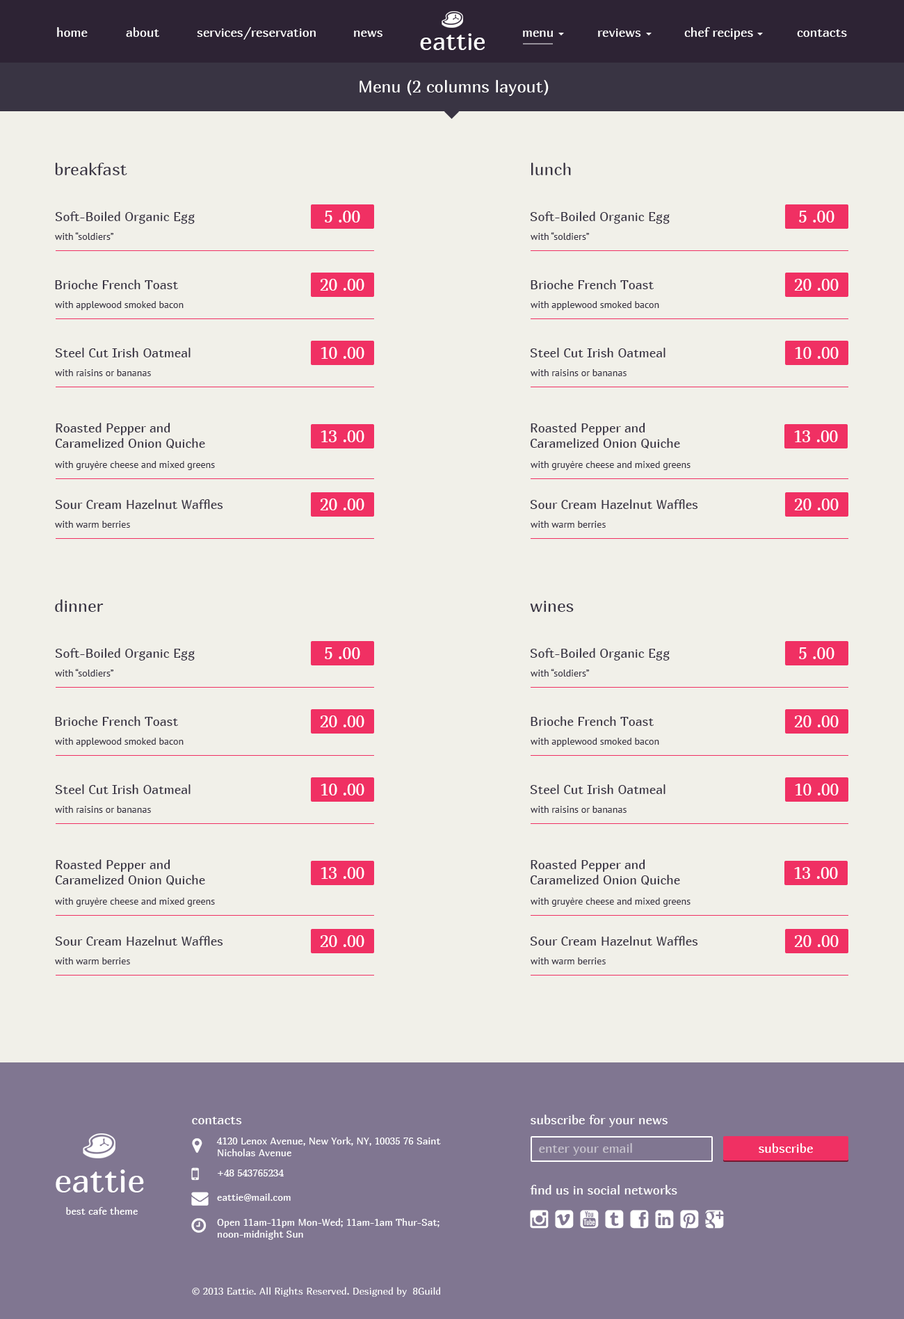
<style>
.page{position:relative;width:904px;height:1319px;background:#f1f0e9}
.page>*{position:absolute;margin:0}
.t1{font:12.5px "Marmelad-Regular";color:#ffffff}
.t2{font:24.3px "Marmelad-Regular";color:#fefefe}
.t3{font:16.7px "Marmelad-Regular";color:#ffffff}
.t4{font:16.7px "Marmelad-Regular";color:#393443}
.t5{font:12.5px "Marmelad-Regular";color:#393443}
.t6{font:9.7px "PTSans-Regular";color:#393443}
.t7{font:9.7px "Marmelad-Regular";color:#ffffff}
.t8{font:12.5px "Marmelad-Regular";color:#c6c2cd}
.t9{font:33.4px "Marmelad-Regular";color:#fefefe}
</style>
<div class="page">
<p class="t1" style="left:57px;top:27px;width:31px;height:10px">home</p>
<p class="t1" style="left:126px;top:27px;width:33px;height:10px">about</p>
<p class="t1" style="left:197px;top:27px;width:54px;height:13px">services/</p>
<p class="t1" style="left:252px;top:29px;width:64px;height:8px">reservation</p>
<p class="t1" style="left:598px;top:29px;width:43px;height:8px">reviews</p>
<p class="t1" style="left:684px;top:27px;width:69px;height:13px">chef recipes</p>
<p class="t1" style="left:797px;top:29px;width:50px;height:8px">contacts</p>
<p class="t1" style="left:354px;top:31px;width:28px;height:6px">news</p>
<p class="t2" style="left:420px;top:33px;width:65px;height:17px">eattie</p>
<p class="t1" style="left:523px;top:31px;width:30px;height:6px">menu</p>
<p class="t3" style="left:360px;top:80px;width:189px;height:16px">Menu (2 columns layout)</p>
<p class="t4" style="left:55px;top:163px;width:72px;height:12px">breakfast</p>
<p class="t4" style="left:531px;top:163px;width:40px;height:12px">lunch</p>
<p class="t5" style="left:56px;top:211px;width:139px;height:13px">Soft-Boiled Organic Egg</p>
<p class="t3" style="left:325px;top:211px;width:35px;height:12px">5 .00</p>
<p class="t5" style="left:531px;top:211px;width:139px;height:13px">Soft-Boiled Organic Egg</p>
<p class="t3" style="left:799px;top:211px;width:35px;height:12px">5 .00</p>
<p class="t6" style="left:55px;top:232px;width:59px;height:8px">with “soldiers”</p>
<p class="t6" style="left:531px;top:232px;width:59px;height:8px">with “soldiers”</p>
<p class="t5" style="left:55px;top:280px;width:123px;height:9px">Brioche French Toast</p>
<p class="t3" style="left:320px;top:279px;width:44px;height:12px">20 .00</p>
<p class="t5" style="left:531px;top:280px;width:123px;height:9px">Brioche French Toast</p>
<p class="t3" style="left:794px;top:279px;width:45px;height:12px">20 .00</p>
<p class="t6" style="left:55px;top:301px;width:129px;height:9px">with applewood smoked bacon</p>
<p class="t6" style="left:531px;top:301px;width:128px;height:9px">with applewood smoked bacon</p>
<p class="t5" style="left:56px;top:348px;width:135px;height:9px">Steel Cut Irish Oatmeal</p>
<p class="t3" style="left:321px;top:347px;width:43px;height:12px">10 .00</p>
<p class="t5" style="left:531px;top:348px;width:134px;height:9px">Steel Cut Irish Oatmeal</p>
<p class="t3" style="left:795px;top:347px;width:44px;height:12px">10 .00</p>
<p class="t6" style="left:55px;top:369px;width:96px;height:7px">with raisins or bananas</p>
<p class="t6" style="left:531px;top:369px;width:96px;height:7px">with raisins or bananas</p>
<p class="t5" style="left:55px;top:423px;width:150px;height:26px">Roasted Pepper and <br>Caramelized Onion Quiche</p>
<p class="t5" style="left:530px;top:423px;width:150px;height:26px">Roasted Pepper and <br>Caramelized Onion Quiche</p>
<p class="t3" style="left:321px;top:430px;width:43px;height:12px">13 .00</p>
<p class="t3" style="left:794px;top:430px;width:44px;height:12px">13 .00</p>
<p class="t6" style="left:55px;top:461px;width:160px;height:9px">with gruyère cheese and mixed greens</p>
<p class="t6" style="left:531px;top:461px;width:159px;height:9px">with gruyère cheese and mixed greens</p>
<p class="t5" style="left:56px;top:499px;width:167px;height:10px">Sour Cream Hazelnut Waffles</p>
<p class="t3" style="left:320px;top:499px;width:44px;height:11px">20 .00</p>
<p class="t5" style="left:531px;top:499px;width:167px;height:10px">Sour Cream Hazelnut Waffles</p>
<p class="t3" style="left:794px;top:499px;width:45px;height:11px">20 .00</p>
<p class="t6" style="left:55px;top:521px;width:75px;height:7px">with warm berries</p>
<p class="t6" style="left:531px;top:521px;width:75px;height:7px">with warm berries</p>
<p class="t4" style="left:55px;top:599px;width:49px;height:13px">dinner</p>
<p class="t4" style="left:530px;top:601px;width:44px;height:11px">wines</p>
<p class="t5" style="left:56px;top:648px;width:139px;height:13px">Soft-Boiled Organic Egg</p>
<p class="t3" style="left:325px;top:647px;width:35px;height:12px">5 .00</p>
<p class="t5" style="left:531px;top:648px;width:139px;height:13px">Soft-Boiled Organic Egg</p>
<p class="t3" style="left:799px;top:647px;width:35px;height:12px">5 .00</p>
<p class="t6" style="left:55px;top:669px;width:59px;height:8px">with “soldiers”</p>
<p class="t6" style="left:531px;top:669px;width:59px;height:8px">with “soldiers”</p>
<p class="t5" style="left:55px;top:716px;width:123px;height:10px">Brioche French Toast</p>
<p class="t3" style="left:320px;top:716px;width:44px;height:11px">20 .00</p>
<p class="t5" style="left:531px;top:716px;width:123px;height:10px">Brioche French Toast</p>
<p class="t3" style="left:794px;top:716px;width:45px;height:11px">20 .00</p>
<p class="t6" style="left:55px;top:738px;width:129px;height:9px">with applewood smoked bacon</p>
<p class="t6" style="left:531px;top:738px;width:128px;height:9px">with applewood smoked bacon</p>
<p class="t5" style="left:56px;top:784px;width:135px;height:10px">Steel Cut Irish Oatmeal</p>
<p class="t3" style="left:321px;top:784px;width:43px;height:11px">10 .00</p>
<p class="t5" style="left:531px;top:784px;width:134px;height:10px">Steel Cut Irish Oatmeal</p>
<p class="t3" style="left:795px;top:784px;width:44px;height:11px">10 .00</p>
<p class="t6" style="left:55px;top:806px;width:96px;height:7px">with raisins or bananas</p>
<p class="t6" style="left:531px;top:806px;width:96px;height:7px">with raisins or bananas</p>
<p class="t5" style="left:55px;top:859px;width:150px;height:26px">Roasted Pepper and <br>Caramelized Onion Quiche</p>
<p class="t3" style="left:321px;top:867px;width:43px;height:12px">13 .00</p>
<p class="t5" style="left:530px;top:859px;width:150px;height:26px">Roasted Pepper and <br>Caramelized Onion Quiche</p>
<p class="t3" style="left:794px;top:867px;width:44px;height:12px">13 .00</p>
<p class="t6" style="left:55px;top:898px;width:160px;height:9px">with gruyère cheese and mixed greens</p>
<p class="t6" style="left:531px;top:898px;width:159px;height:9px">with gruyère cheese and mixed greens</p>
<p class="t5" style="left:56px;top:936px;width:167px;height:10px">Sour Cream Hazelnut Waffles</p>
<p class="t3" style="left:320px;top:935px;width:44px;height:12px">20 .00</p>
<p class="t5" style="left:531px;top:936px;width:167px;height:10px">Sour Cream Hazelnut Waffles</p>
<p class="t3" style="left:794px;top:935px;width:45px;height:12px">20 .00</p>
<p class="t6" style="left:55px;top:958px;width:75px;height:6px">with warm berries</p>
<p class="t6" style="left:531px;top:958px;width:75px;height:6px">with warm berries</p>
<p class="t1" style="left:192px;top:1117px;width:50px;height:7px">contacts</p>
<p class="t1" style="left:531px;top:1115px;width:137px;height:12px">subscribe for your news</p>
<p class="t7" style="left:216px;top:1137px;width:225px;height:19px">4120 Lenox Avenue, New York, NY, 10035 76 Saint Nicholas Avenue</p>
<p class="t8" style="left:539px;top:1143px;width:93px;height:13px">enter your email</p>
<p class="t1" style="left:759px;top:1143px;width:54px;height:10px">subscribe</p>
<p class="t9" style="left:56px;top:1170px;width:88px;height:23px">eattie</p>
<p class="t7" style="left:218px;top:1170px;width:66px;height:7px">+48 543765234</p>
<p class="t7" style="left:217px;top:1193px;width:74px;height:9px">eattie@mail.com</p>
<p class="t1" style="left:530px;top:1185px;width:147px;height:10px">find us in social networks</p>
<p class="t7" style="left:66px;top:1207px;width:72px;height:8px">best cafe theme</p>
<p class="t7" style="left:217px;top:1218px;width:222px;height:22px">Open 11am-11pm Mon-Wed; 11am-1am Thur-Sat; noon-midnight Sun</p>
<p class="t7" style="left:192px;top:1287px;width:248px;height:10px">© 2013 Eattie. All Rights Reserved. Designed by  8Guild</p>
</div>
